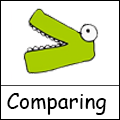
<style>
.page{position:relative;width:120px;height:120px;background:#ffffff}
.page>*{position:absolute;margin:0}
.t1{font:21px "ComicSansMS";color:#000000}
</style>
<div class="page">
<p class="t1" style="left:7px;top:93px;width:99px;height:22px">Comparing</p>
</div>
